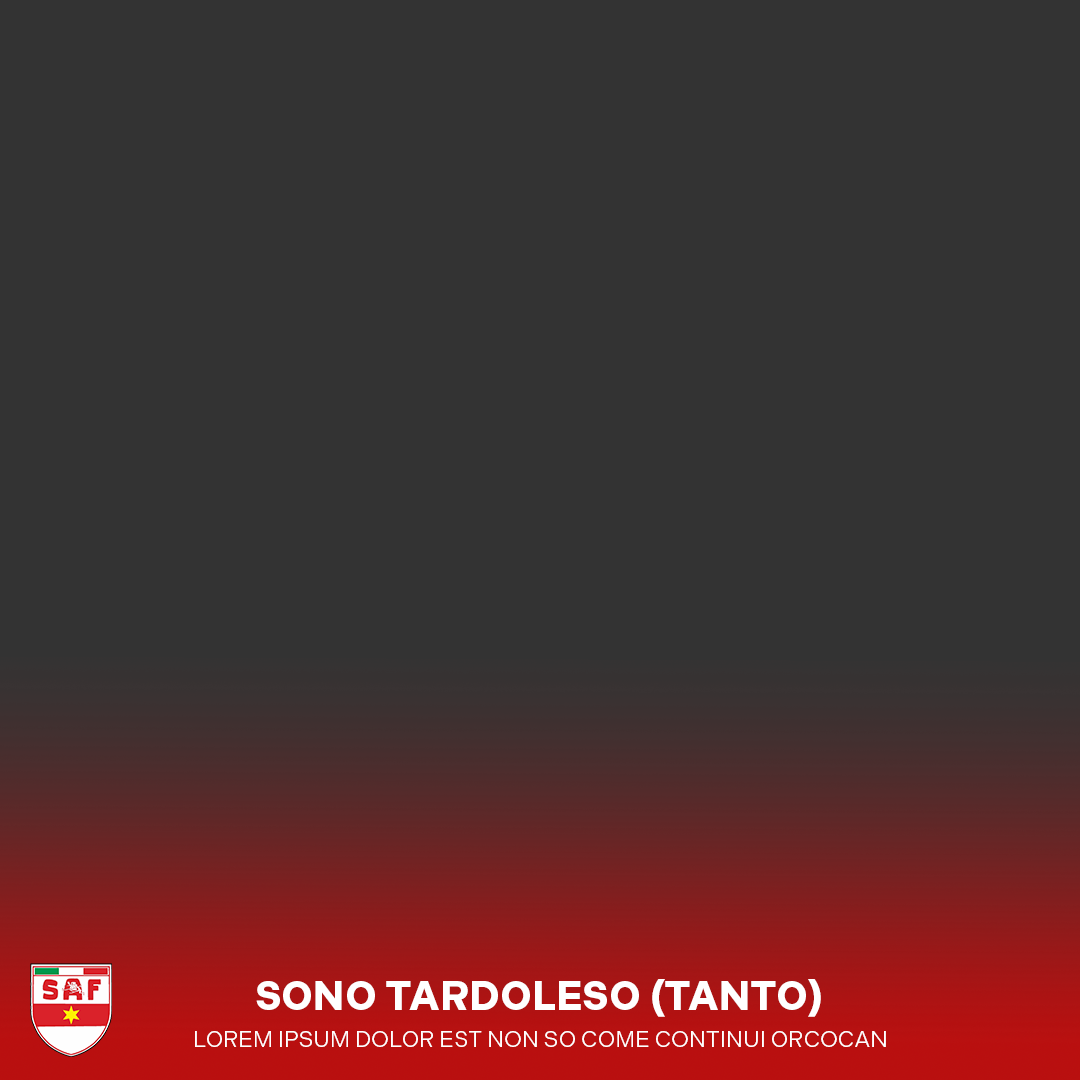
<style>
.page{position:relative;width:1080px;height:1080px;background:#333333}
.page>*{position:absolute;margin:0}
.t1{font:40.5px "Indivisible-Bold";color:#ffffff}
.t2{font:22.5px "Indivisible-Regular";color:#ffffff}
</style>
<div class="page">
<p class="t1" style="left:256px;top:979px;width:565px;height:38px">SONO TARDOLESO (TANTO)</p>
<p class="t2" style="left:195px;top:1031px;width:691px;height:16px">LOREM IPSUM DOLOR EST NON SO COME CONTINUI ORCOCAN</p>
</div>
